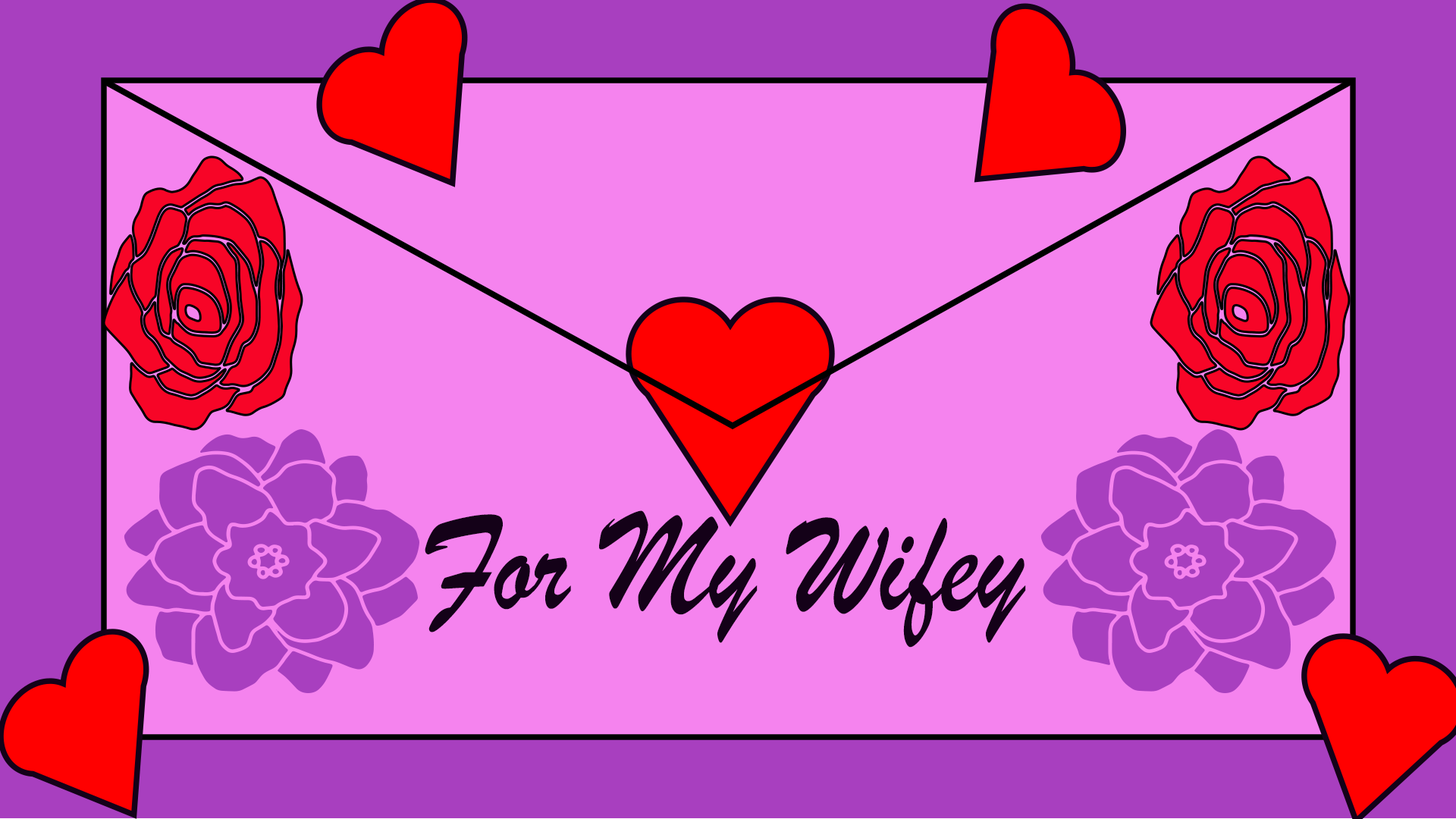
<style>
.page{position:relative;width:1456px;height:819px;background:#f583ee}
.page>*{position:absolute;margin:0}
.t1{font:151.7px "BrushScriptMT";color:#140118;scale:0.83 1}
</style>
<div class="page">
<p class="t1" style="left:425px;top:510px;width:601px;height:138px">For My Wifey</p>
</div>
